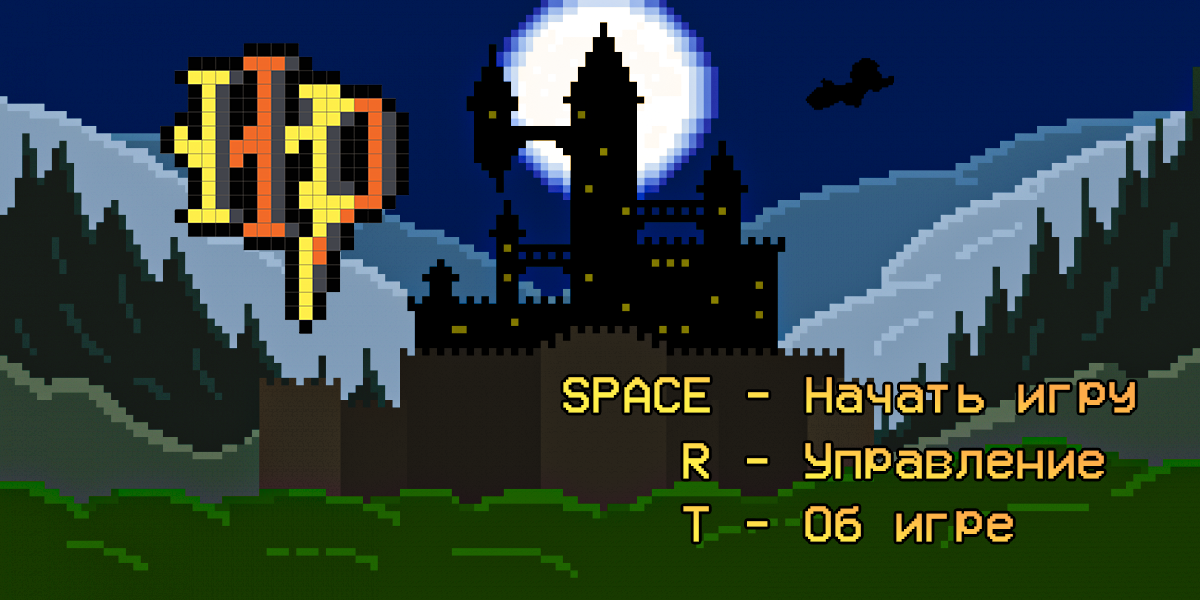
<style>
.page{position:relative;width:1200px;height:600px}
.page>*{position:absolute;margin:0}
.t1{font:40.5px "VCROSDMonoRUSbyD"}
</style>
<div class="page">
<p class="t1" style="left:563px;top:377px;width:572px;height:36px">SPACE - Начать игру</p>
<p class="t1" style="left:683px;top:443px;width:421px;height:36px">R - Управление</p>
<p class="t1" style="left:683px;top:506px;width:330px;height:36px">T - Об игре</p>
</div>
